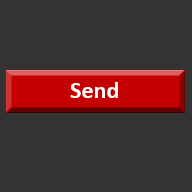
<style>
.page{position:relative;width:192px;height:192px;background:#333333}
.page>*{position:absolute;margin:0}
.t1{font:24px "Calibri-Bold";color:#ffffff}
</style>
<div class="page">
<p class="t1" style="left:70px;top:82px;width:48px;height:16px">Send</p>
</div>
